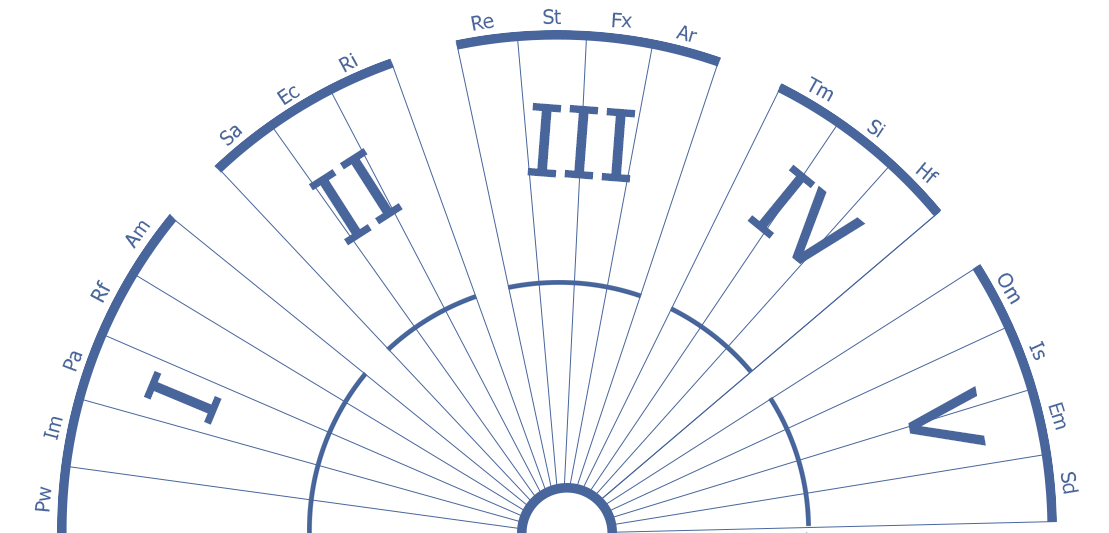
<style>
.page{position:relative;width:1109px;height:533px;background:#ffffff}
.page>*{position:absolute;margin:0}
.t1{font:20px "Tahoma";color:#48669c}
.t2{font:100px "Tahoma";color:#48669c}
</style>
<div class="page">
<p class="t1" style="left:471px;top:15px;width:23px;height:16px;rotate:-11deg">Re</p>
<p class="t1" style="left:543px;top:8px;width:18px;height:17px;rotate:-2deg">St</p>
<p class="t1" style="left:612px;top:12px;width:20px;height:16px;rotate:4deg">Fx</p>
<p class="t1" style="left:675px;top:25px;width:23px;height:17px;rotate:16deg">Ar</p>
<p class="t1" style="left:338px;top:52px;width:20px;height:21px;rotate:-28deg">Ri</p>
<p class="t1" style="left:809px;top:76px;width:24px;height:26px;rotate:29deg">Tm</p>
<p class="t1" style="left:276px;top:86px;width:24px;height:19px;rotate:-34deg">Ec</p>
<p class="t2" style="left:527px;top:102px;width:109px;height:81px;rotate:4deg">III</p>
<p class="t1" style="left:219px;top:125px;width:24px;height:21px;rotate:-41deg">Sa</p>
<p class="t1" style="left:867px;top:119px;width:19px;height:19px;rotate:34deg">Si</p>
<p class="t2" style="left:309px;top:148px;width:94px;height:98px;rotate:-33deg">II</p>
<p class="t1" style="left:915px;top:161px;width:25px;height:23px;rotate:40deg">Hf</p>
<p class="t2" style="left:747px;top:164px;width:119px;height:101px;rotate:39deg">IV</p>
<p class="t1" style="left:125px;top:221px;width:26px;height:28px;rotate:-55deg">Am</p>
<p class="t1" style="left:998px;top:273px;width:22px;height:32px;rotate:59deg">Om</p>
<p class="t1" style="left:1029px;top:340px;width:16px;height:21px;rotate:65deg">Is</p>
<p class="t1" style="left:62px;top:351px;width:21px;height:21px;rotate:-69deg">Pa</p>
<p class="t2" style="left:143px;top:370px;width:79px;height:55px;rotate:-67deg">I</p>
<p class="t2" style="left:908px;top:386px;width:78px;height:60px;rotate:80deg">V</p>
<p class="t1" style="left:1048px;top:402px;width:18px;height:28px;rotate:73deg">Em</p>
<p class="t1" style="left:43px;top:416px;width:20px;height:24px;rotate:-75deg">Im</p>
<p class="t1" style="left:1060px;top:471px;width:19px;height:23px;rotate:81deg">Sd</p>
<p class="t1" style="left:34px;top:486px;width:18px;height:26px;rotate:-85deg">Pw</p>
</div>
